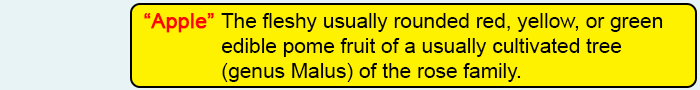
<style>
.page{position:relative;width:700px;height:90px;background:#fff200}
.page>*{position:absolute;margin:0}
.t1{font:20.8px "ArialMT";color:#000000}
.t2{font:20.8px "ArialMT";color:#fe0404;font-weight:bold}
</style>
<div class="page">
<p class="t1" style="left:144px;top:13px;width:519px;height:69px"><span class="t2">“Apple” </span>The fleshy usually rounded red, yellow, or green <br>   edible pome fruit of a usually cultivated tree <br>   (genus Malus) of the rose family.</p>
</div>
